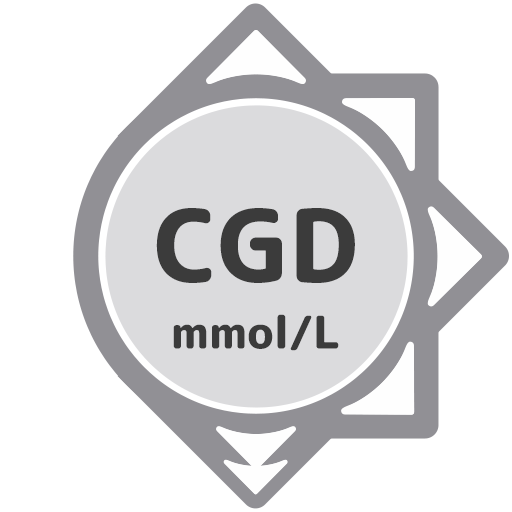
<style>
.page{position:relative;width:512px;height:512px;background:#ffffff}
.page>*{position:absolute;margin:0}
.t1{font:100px "RoundedMplus1c-ExtraBold";color:#3b3b3b}
.t2{font:44.9px "RoundedMplus1c-ExtraBold";color:#3b3b3b}
</style>
<div class="page">
<p class="t1" style="left:156px;top:208px;width:199px;height:75px">CGD</p>
<p class="t2" style="left:173px;top:314px;width:166px;height:37px">mmol/L</p>
</div>
